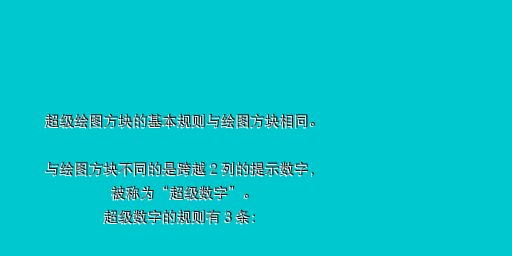
<style>
.page{position:relative;width:512px;height:256px;background:#00c8cf}
.page>*{position:absolute;margin:0}
.t1{font:14.7px/24px "DFPHeiW5-GB"}
</style>
<div class="page">
<p class="t1" style="left:45px;top:113px;width:270px;height:111px;text-align:center">超级绘图方块的基本规则与绘图方块相同。<br><br>与绘图方块不同的是跨越２列的提示数字，<br>被称为“超级数字”。<br>超级数字的规则有３条：</p>
</div>
